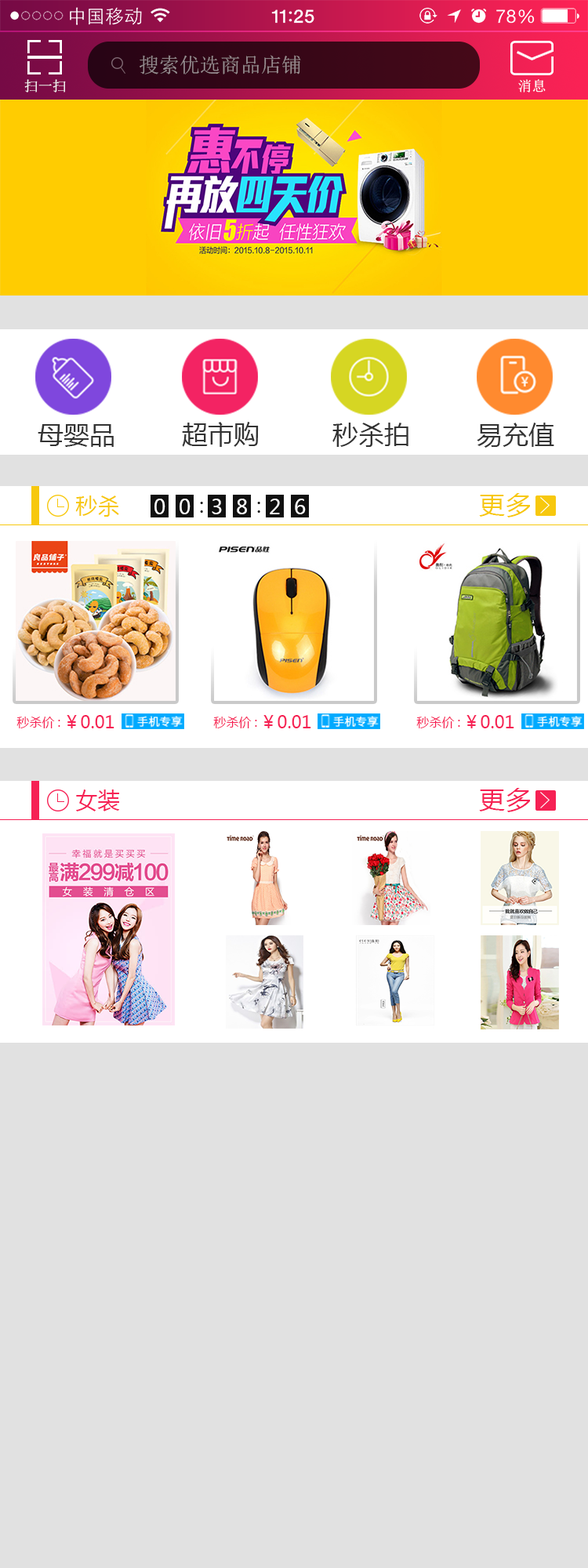
<style>
.page{position:relative;width:588px;height:1568px;background:#e1e1e1}
.page>*{position:absolute;margin:0}
.t1{font:20.4px "SimSun";color:#998e92}
.t2{font:14.1px "SimSun";color:#ffffff}
.t3{font:26.1px "MicrosoftYaHei";color:#333333}
.t4{font:22px "MicrosoftYaHei";color:#f7c80e}
.t5{font:26.1px "MicrosoftYaHei";color:#f7c80e}
.t6{font:20.4px "MicrosoftYaHei";color:#ffffff}
.t7{font:20.4px "MicrosoftYaHei";color:#101010}
.t8{font:12.5px "MicrosoftYaHei";color:#f62154}
.t9{font:17.2px "MicrosoftYaHei";color:#f62154}
.t10{font:22px "MicrosoftYaHei";color:#f62154}
.t11{font:26.1px "MicrosoftYaHei";color:#f62154}
</style>
<div class="page">
<p class="t1" style="left:140px;top:55px;width:161px;height:19px">搜索优选商品店铺</p>
<p class="t2" style="left:24px;top:79px;width:42px;height:14px">扫一扫</p>
<p class="t2" style="left:518px;top:79px;width:28px;height:14px">消息</p>
<p class="t3" style="left:38px;top:424px;width:76px;height:23px">母婴品</p>
<p class="t3" style="left:182px;top:422px;width:77px;height:25px">超市购</p>
<p class="t3" style="left:332px;top:423px;width:76px;height:24px">秒杀拍</p>
<p class="t3" style="left:477px;top:423px;width:77px;height:25px">易充值</p>
<p class="t4" style="left:75px;top:495px;width:44px;height:22px">秒杀</p>
<p class="t5" style="left:479px;top:493px;width:51px;height:24px">更多</p>
<p class="t6" style="left:154px;top:499px;width:11px;height:15px">0</p>
<p class="t6" style="left:180px;top:499px;width:11px;height:15px">0</p>
<p class="t7" style="left:200px;top:502px;width:3px;height:11px">:</p>
<p class="t6" style="left:212px;top:499px;width:10px;height:15px">3</p>
<p class="t6" style="left:237px;top:499px;width:10px;height:15px">8</p>
<p class="t7" style="left:257px;top:502px;width:3px;height:11px">:</p>
<p class="t6" style="left:270px;top:499px;width:10px;height:15px">2</p>
<p class="t6" style="left:295px;top:499px;width:11px;height:15px">6</p>
<p class="t8" style="left:16px;top:717px;width:44px;height:11px">秒杀价:</p>
<p class="t9" style="left:67px;top:715px;width:47px;height:13px">￥0.01</p>
<p class="t8" style="left:213px;top:717px;width:44px;height:11px">秒杀价:</p>
<p class="t9" style="left:263px;top:715px;width:48px;height:13px">￥0.01</p>
<p class="t8" style="left:416px;top:717px;width:44px;height:11px">秒杀价:</p>
<p class="t9" style="left:466px;top:715px;width:48px;height:13px">￥0.01</p>
<p class="t10" style="left:76px;top:789px;width:44px;height:22px">女装</p>
<p class="t11" style="left:479px;top:788px;width:51px;height:24px">更多</p>
</div>
